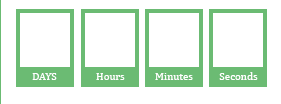
<style>
.page{position:relative;width:281px;height:104px;background:#ffffff}
.page>*{position:absolute;margin:0}
.t1{font:11px "Cambria";color:#ffffff}
</style>
<div class="page">
<p class="t1" style="left:32px;top:73px;width:25px;height:7px">DAYS</p>
<p class="t1" style="left:96px;top:73px;width:29px;height:7px">Hours</p>
<p class="t1" style="left:155px;top:73px;width:38px;height:7px">Minutes</p>
<p class="t1" style="left:219px;top:72px;width:39px;height:8px">Seconds</p>
</div>
